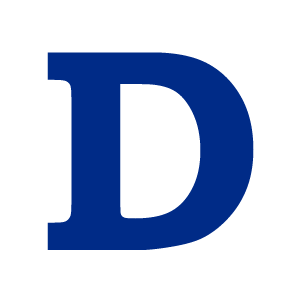
<style>
.page{position:relative;width:300px;height:300px;background:#ffffff}
.page>*{position:absolute;margin:0}
.t1{font:290px "BookmanOldStyle-Bold";color:#002b87}
</style>
<div class="page">
<p class="t1" style="left:47px;top:52px;width:207px;height:198px">D</p>
</div>
